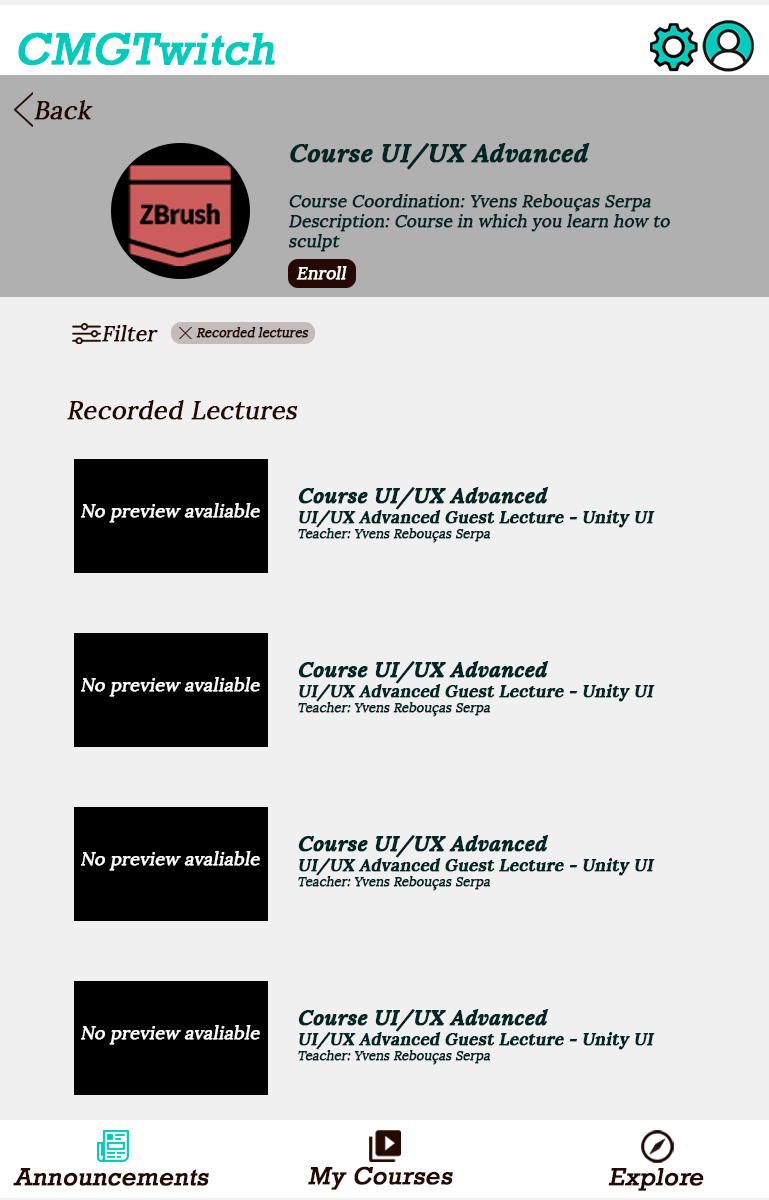
<style>
.page{position:relative;width:769px;height:1200px;background:#f0f0f0}
.page>*{position:absolute;margin:0}
.t1{font:45.4px "Rockwell";color:#00ccbe;font-weight:bold;font-style:italic}
.t2{font:25px "Lora-Regular";color:#250902;font-weight:bold;font-style:italic}
.t3{font:16.7px "Lora-Regular";color:#022624;font-weight:bold;font-style:italic}
.t4{font:25px "Lora-BoldItalic";color:#022624;font-weight:bold;font-style:italic}
.t5{font:16.7px "Lora-Regular";color:#ffffff;font-weight:bold;font-style:italic}
.t6{font:20.8px "Lora-Regular";color:#250902;font-weight:bold;font-style:italic}
.t7{font:12.5px "Lora-Regular";color:#250902;font-weight:bold;font-style:italic}
.t8{font:16.7px "Lora-Bold";color:#022624;font-weight:bold;font-style:italic}
.t9{font:20.8px "Lora-BoldItalic";color:#022624;font-weight:bold;font-style:italic}
.t10{font:12.5px "Lora-Regular";color:#022624;font-weight:bold;font-style:italic}
.t11{font:17.7px "Lora-Regular";color:#ffffff;font-weight:bold;font-style:italic}
.t12{font:25px "Rockwell";color:#250902;font-weight:bold;font-style:italic}
</style>
<div class="page">
<p class="t1" style="left:18px;top:32px;width:257px;height:34px">CMGTwitch</p>
<p class="t2" style="left:34px;top:100px;width:59px;height:20px">Back</p>
<p class="t3" style="left:288px;top:143px;width:382px;height:109px"><span class="t4">Course UI/UX Advanced<br><br></span>Course Coordination: Yvens Rebouças Serpa<br>Description: Course in which you learn how to sculpt</p>
<p class="t5" style="left:296px;top:266px;width:51px;height:14px">Enroll</p>
<p class="t6" style="left:102px;top:325px;width:56px;height:17px">Filter</p>
<p class="t7" style="left:196px;top:327px;width:113px;height:11px">Recorded lectures</p>
<p class="t2" style="left:67px;top:400px;width:231px;height:20px">Recorded Lectures</p>
<p class="t8" style="left:298px;top:487px;width:357px;height:56px"><span class="t9">Course UI/UX Advanced<br></span>UI/UX Advanced Guest Lecture - Unity UI<br><span class="t10">Teacher: Yvens Rebouças Serpa</span></p>
<p class="t11" style="left:81px;top:503px;width:179px;height:20px">No preview avaliable</p>
<p class="t8" style="left:298px;top:661px;width:357px;height:56px"><span class="t9">Course UI/UX Advanced<br></span>UI/UX Advanced Guest Lecture - Unity UI<br><span class="t10">Teacher: Yvens Rebouças Serpa</span></p>
<p class="t11" style="left:81px;top:677px;width:179px;height:20px">No preview avaliable</p>
<p class="t8" style="left:298px;top:835px;width:357px;height:56px"><span class="t9">Course UI/UX Advanced<br></span>UI/UX Advanced Guest Lecture - Unity UI<br><span class="t10">Teacher: Yvens Rebouças Serpa</span></p>
<p class="t11" style="left:81px;top:851px;width:179px;height:20px">No preview avaliable</p>
<p class="t8" style="left:298px;top:1009px;width:357px;height:56px"><span class="t9">Course UI/UX Advanced<br></span>UI/UX Advanced Guest Lecture - Unity UI<br><span class="t10">Teacher: Yvens Rebouças Serpa</span></p>
<p class="t11" style="left:81px;top:1025px;width:179px;height:20px">No preview avaliable</p>
<p class="t12" style="left:13px;top:1168px;width:196px;height:18px">Announcements</p>
<p class="t12" style="left:308px;top:1166px;width:145px;height:24px">My Courses</p>
<p class="t12" style="left:608px;top:1168px;width:96px;height:23px">Explore</p>
</div>
